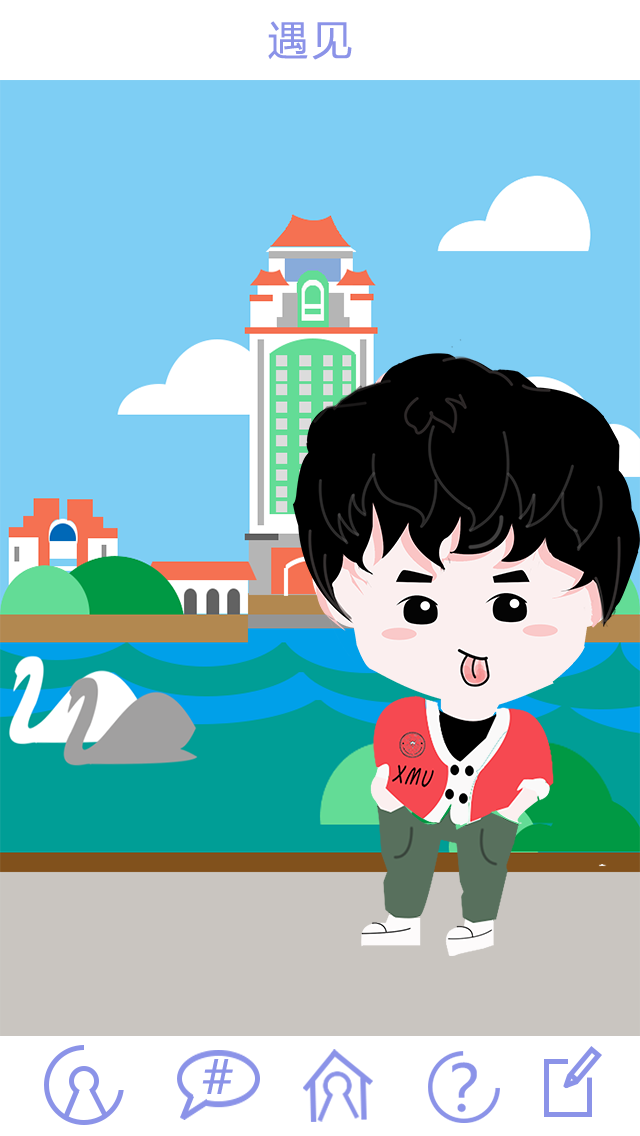
<style>
.page{position:relative;width:640px;height:1136px;background:#7ecef4}
.page>*{position:absolute;margin:0}
.t1{font:40px "MicrosoftYaHei";letter-spacing:0.1em;color:#8b93e8}
</style>
<div class="page">
<p class="t1" style="left:268px;top:21px;width:84px;height:39px">遇见</p>
</div>
